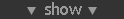
<style>
.page{position:relative;width:124px;height:19px;background:#333333}
.page>*{position:absolute;margin:0}
.t1{font:16.5px "TrebuchetMS";color:#9a9a9a}
</style>
<div class="page">
<p class="t1" style="left:45px;top:2px;width:37px;height:13px">show</p>
</div>
